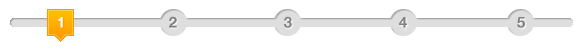
<style>
.page{position:relative;width:586px;height:48px;background:#ffffff}
.page>*{position:absolute;margin:0}
.t1{font:15px "HelveticaNeue-Bold"}
.t2{font:15px "HelveticaNeue-Bold";color:#ffffff}
.t3{font:15px "HelveticaNeue-Bold";color:#808080}
</style>
<div class="page">
<p class="t1" style="left:57px;top:17px;width:5px;height:11px">1</p>
<p class="t2" style="left:58px;top:17px;width:5px;height:11px">1</p>
<p class="t3" style="left:169px;top:16px;width:8px;height:12px">2</p>
<p class="t3" style="left:284px;top:16px;width:8px;height:12px">3</p>
<p class="t3" style="left:399px;top:17px;width:8px;height:11px">4</p>
<p class="t3" style="left:517px;top:17px;width:8px;height:11px">5</p>
</div>
